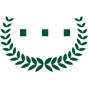
<style>
.page{position:relative;width:88px;height:88px;background:#ffffff}
.page>*{position:absolute;margin:0}
.t1{font:47px "HYb5gj";color:#00513a;scale:0.93 1}
</style>
<div class="page">
<p class="t1" style="left:20px;top:29px;width:50px;height:8px">...</p>
</div>
